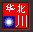
<style>
.page{position:relative;width:33px;height:32px;background:#f20000}
.page>*{position:absolute;margin:0}
.t1{font:10.4px "SimSun";color:#ffffff}
.t2{font:11.7px "SimSun";color:#ffffff}
</style>
<div class="page">
<p class="t1" style="left:6px;top:4px;width:19px;height:9px">华北</p>
<p class="t2" style="left:16px;top:15px;width:11px;height:12px">川</p>
</div>
